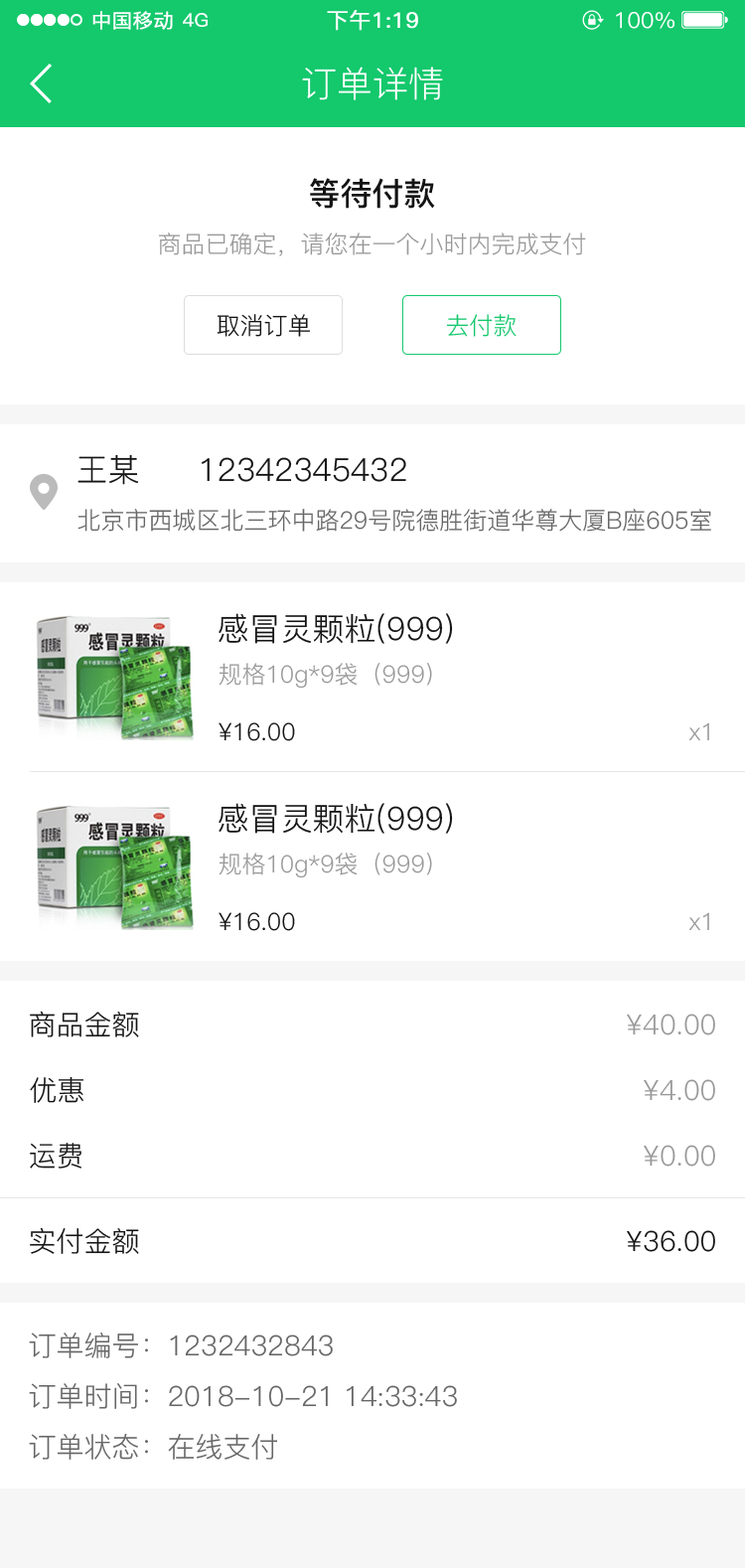
<style>
.page{position:relative;width:745px;height:1568px;background:#ffffff}
.page>*{position:absolute;margin:0}
.t1{font:35.8px "PingFang-SC-Regular";color:#ffffff}
.t2{font:31.8px "PingFang-SC-Bold";color:#141414}
.t3{font:23.8px "PingFang-SC-Regular";color:#999999}
.t4{font:23.8px "PingFang-SC-Regular";color:#141414}
.t5{font:23.8px "PingFang-SC-Regular";color:#14c86c}
.t6{font:31.8px "PingFang-SC-Regular";color:#141414}
.t7{font:23.8px "PingFang-SC-Regular";color:#666666}
.t8{font:27.8px "PingFang-SC-Regular";color:#141414}
.t9{font:27.8px "PingFang-SC-Regular";color:#999999}
.t10{font:27.8px "PingFang-SC-Regular";color:#666666}
</style>
<div class="page">
<p class="t1" style="left:302px;top:67px;width:141px;height:33px">订单详情</p>
<p class="t2" style="left:310px;top:178px;width:125px;height:31px">等待付款</p>
<p class="t3" style="left:159px;top:233px;width:427px;height:23px">商品已确定，请您在一个小时内完成支付</p>
<p class="t4" style="left:217px;top:314px;width:93px;height:23px">取消订单</p>
<p class="t5" style="left:446px;top:314px;width:71px;height:23px">去付款</p>
<p class="t6" style="left:78px;top:454px;width:61px;height:31px">王某</p>
<p class="t6" style="left:202px;top:457px;width:204px;height:25px">12342345432</p>
<p class="t7" style="left:78px;top:509px;width:633px;height:23px">北京市西城区北三环中路29号院德胜街道华尊大厦B座605室</p>
<p class="t6" style="left:219px;top:613px;width:234px;height:31px">感冒灵颗粒(999)</p>
<p class="t3" style="left:219px;top:663px;width:213px;height:26px">规格10g*9袋（999）</p>
<p class="t4" style="left:219px;top:722px;width:76px;height:19px">¥16.00</p>
<p class="t3" style="left:689px;top:722px;width:20px;height:19px">x1</p>
<p class="t6" style="left:219px;top:803px;width:234px;height:31px">感冒灵颗粒(999)</p>
<p class="t3" style="left:219px;top:853px;width:213px;height:25px">规格10g*9袋（999）</p>
<p class="t4" style="left:219px;top:912px;width:76px;height:19px">¥16.00</p>
<p class="t3" style="left:689px;top:912px;width:20px;height:19px">x1</p>
<p class="t8" style="left:30px;top:1011px;width:109px;height:26px">商品金额</p>
<p class="t9" style="left:627px;top:1014px;width:88px;height:21px">¥40.00</p>
<p class="t8" style="left:30px;top:1076px;width:53px;height:27px">优惠</p>
<p class="t9" style="left:644px;top:1079px;width:71px;height:22px">¥4.00</p>
<p class="t8" style="left:30px;top:1143px;width:51px;height:26px">运费</p>
<p class="t9" style="left:644px;top:1145px;width:71px;height:22px">¥0.00</p>
<p class="t8" style="left:30px;top:1227px;width:109px;height:27px">实付金额</p>
<p class="t8" style="left:627px;top:1230px;width:88px;height:22px">¥36.00</p>
<p class="t10" style="left:29px;top:1333px;width:304px;height:25px">订单编号：1232432843</p>
<p class="t10" style="left:29px;top:1383px;width:428px;height:26px">订单时间：2018-10-21 14:33:43</p>
<p class="t10" style="left:29px;top:1433px;width:249px;height:27px">订单状态：在线支付</p>
</div>
